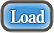
<style>
.page{position:relative;width:54px;height:33px}
.page>*{position:absolute;margin:0}
.t1{font:17px "RyuminPro-ExBold";letter-spacing:-0.08em;color:#ffffff;font-weight:bold;scale:0.9 1}
</style>
<div class="page">
<p class="t1" style="left:10px;top:9px;width:35px;height:14px">Load</p>
</div>
